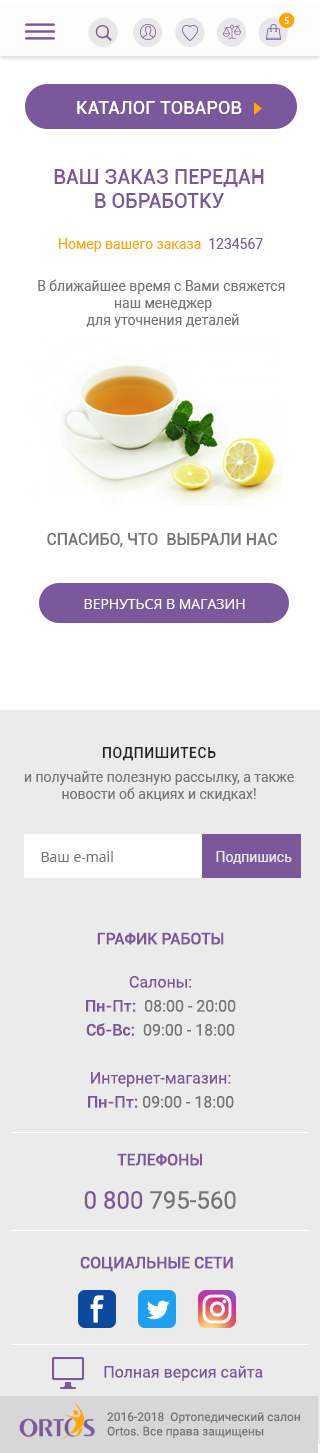
<style>
.page{position:relative;width:320px;height:1453px;background:#ebebeb}
.page>*{position:absolute;margin:0}
.t1{font:10.2px "MyriadPro-Regular";letter-spacing:0.1em;color:#ffffff;text-transform:uppercase}
.t2{font:18px "Roboto-Medium";letter-spacing:0.01em;color:#ffffff;text-transform:uppercase}
.t3{font:20px "Roboto-Medium";color:#7b589c;text-transform:uppercase}
.t4{font:14px "Roboto-Regular";color:#ffa700}
.t5{font:14px "Roboto-Regular";color:#7b589c}
.t6{font:14px "Roboto-Regular";color:#757575}
.t7{font:16px "Roboto-Medium";color:#757575;text-transform:uppercase}
.t8{font:14px "OpenSans";color:#ffffff;text-transform:uppercase}
.t9{font:14px/24px "Roboto-Regular";color:#757575}
.t10{font:14px "Roboto-Medium";letter-spacing:0.05em;color:#212121;text-transform:uppercase}
.t11{font:14px "OpenSans";color:#757575}
.t12{font:14px "Roboto-Regular";color:#ebebeb}
.t13{font:16px/24px "Roboto-Regular";color:#7b589c}
.t14{font:16px "Roboto-Medium";color:#7b589c;text-transform:uppercase}
.t15{font:16px/24px "Roboto-Medium";color:#7b589c}
.t16{font:16px/24px "Roboto-Regular";color:#757575}
.t17{font:24px/24px "Roboto-Regular";color:#7b589c}
.t18{font:24px/24px "Roboto-Regular";color:#757575}
.t19{font:16px "Roboto-Regular";color:#7b589c}
.t20{font:12px "Roboto-Regular";color:#757575}
</style>
<div class="page">
<p class="t1" style="left:284px;top:17px;width:5px;height:7px">5</p>
<p class="t2" style="left:77px;top:101px;width:165px;height:13px">Каталог товаров</p>
<p class="t3" style="left:54px;top:169px;width:210px;height:39px;text-align:center">ВАш заказ передан <br>в обработку</p>
<p class="t4" style="left:59px;top:238px;width:204px;height:14px">Номер вашего заказа  <span class="t5">1234567</span></p>
<p class="t6" style="left:38px;top:279px;width:247px;height:49px;text-align:center">В ближайшее время с Вами свяжется <br>наш менеджер<br>для уточнения деталей</p>
<p class="t7" style="left:47px;top:533px;width:230px;height:14px">спасибо, что  выбрали нас</p>
<p class="t8" style="left:84px;top:599px;width:161px;height:10px">вернуться в магазин</p>
<p class="t9" style="left:24px;top:747px;width:270px;height:54px;text-align:center"><span class="t10">Подпишитесь <br></span>и получайте полезную рассылку, а также <span class="t6">новости об акциях и скидках!</span></p>
<p class="t11" style="left:41px;top:851px;width:72px;height:11px">Ваш e-mail</p>
<p class="t12" style="left:216px;top:851px;width:76px;height:13px">Подпишись</p>
<p class="t13" style="left:86px;top:932px;width:150px;height:176px;text-align:center"><span class="t14">График работы<br><br></span>Салоны: <br><span class="t15">Пн-Пт:</span><span class="t16">  08:00 - 20:00 <br></span><span class="t15">Сб-Вс:</span><span class="t16">  09:00 - 18:00<br><br></span>Интернет-магазин:<br><span class="t15">Пн-Пт:</span><span class="t16"> 09:00 - 18:00</span></p>
<p class="t14" style="left:84px;top:1153px;width:152px;height:56px;text-align:center">Телефоны<br><br><span class="t17">0 800 </span><span class="t18">795-560</span></p>
<p class="t14" style="left:80px;top:1256px;width:153px;height:16px">Социальные сети</p>
<p class="t19" style="left:104px;top:1365px;width:159px;height:16px">Полная версия сайта</p>
<p class="t20" style="left:107px;top:1412px;width:193px;height:26px">2016-2018  Ортопедический салон Ortos. Все права защищены</p>
</div>
